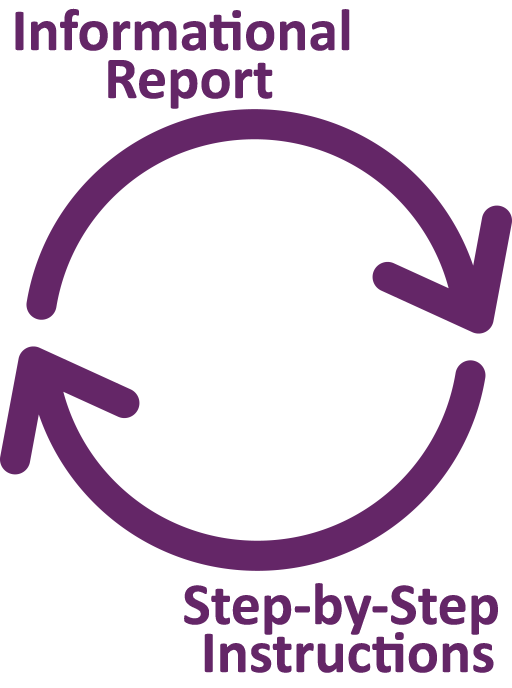
<style>
.page{position:relative;width:512px;height:688px;background:#ffffff}
.page>*{position:absolute;margin:0}
.t1{font:60px/48px "Calibri-Bold";color:#642667}
</style>
<div class="page">
<p class="t1" style="left:15px;top:8px;width:335px;height:101px;text-align:center">Informational <br>Report</p>
<p class="t1" style="left:184px;top:583px;width:314px;height:90px;text-align:center">Step-by-Step <br>Instructions</p>
</div>
